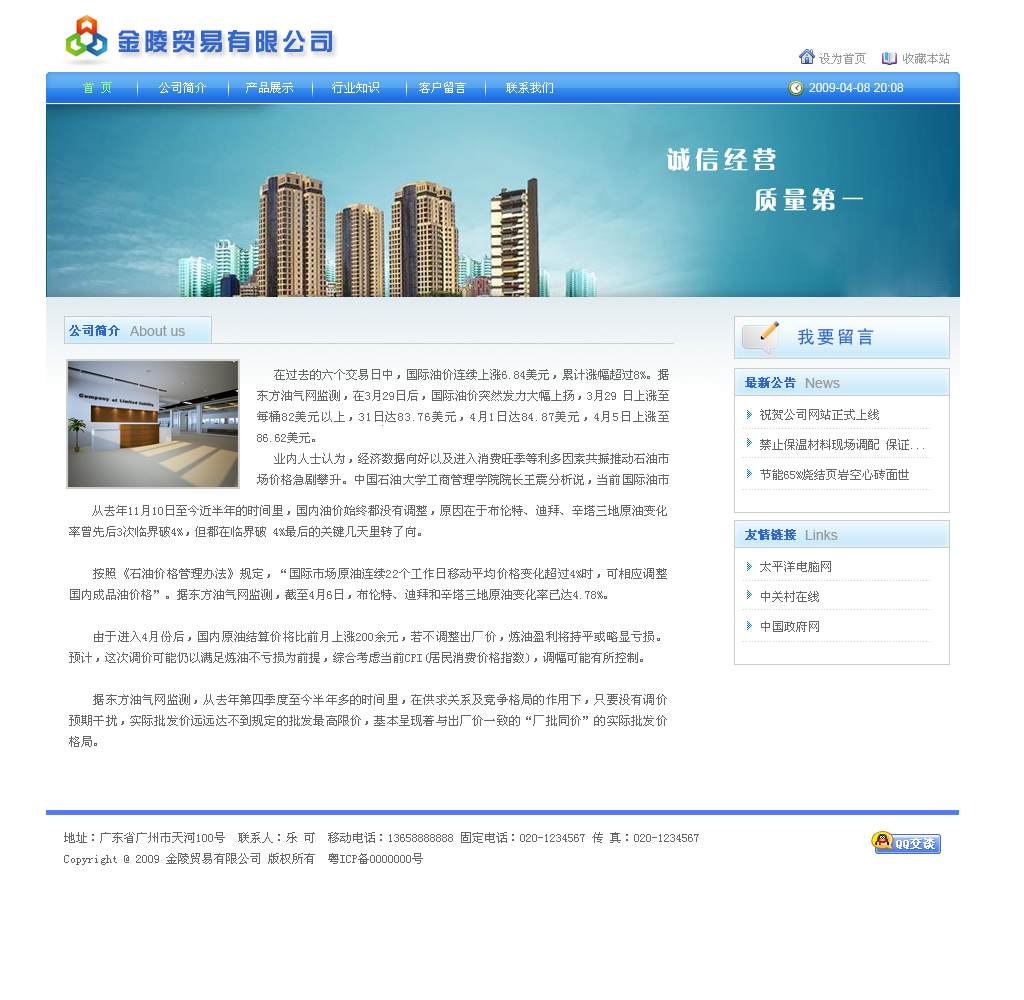
<style>
.page{position:relative;width:1024px;height:1000px;background:#ffffff}
.page>*{position:absolute;margin:0}
.t1{font:24px "HYk1gj";letter-spacing:0.15em;color:#3366cc}
.t2{font:12px "SimSun";color:#999999}
.t3{font:12px "SimSun";color:#99ff66}
.t4{font:12px "SimSun";color:#ffffff}
.t5{font:12px "ArialMT";color:#ffffff}
.t6{font:24px "FZCQJW--GB1-0";letter-spacing:0.2em;color:#fefefe}
.t7{font:12px "SimSun";color:#3366cc;font-weight:bold}
.t8{font:14px "ArialMT";color:#999999}
.t9{font:18px "SimHei";letter-spacing:0.1em;color:#3366cc}
.t10{font:12px "SimSun";color:#666666}
.t11{font:12px "SimSun";color:#666666;text-transform:uppercase}
</style>
<div class="page">
<p class="t1" style="left:118px;top:30px;width:214px;height:23px">金陵贸易有限公司</p>
<p class="t2" style="left:819px;top:53px;width:47px;height:11px">设为首页</p>
<p class="t2" style="left:903px;top:53px;width:47px;height:11px">收藏本站</p>
<p class="t3" style="left:83px;top:82px;width:29px;height:11px">首 页</p>
<p class="t4" style="left:159px;top:82px;width:47px;height:11px">公司简介</p>
<p class="t4" style="left:246px;top:82px;width:47px;height:11px">产品展示</p>
<p class="t4" style="left:332px;top:82px;width:47px;height:11px">行业知识</p>
<p class="t4" style="left:419px;top:82px;width:47px;height:11px">客户留言</p>
<p class="t4" style="left:506px;top:82px;width:47px;height:11px">联系我们</p>
<p class="t5" style="left:809px;top:83px;width:95px;height:9px">2009-04-08 20:08</p>
<p class="t6" style="left:666px;top:148px;width:110px;height:23px">诚信经营</p>
<p class="t6" style="left:754px;top:188px;width:109px;height:23px">质量第一</p>
<p class="t7" style="left:69px;top:325px;width:51px;height:11px">公司简介</p>
<p class="t8" style="left:130px;top:325px;width:55px;height:11px">About us</p>
<p class="t9" style="left:798px;top:328px;width:76px;height:17px">我要留言</p>
<p class="t10" style="left:257px;top:369px;width:412px;height:116px;text-align:justify">在过去的六个交易日中，国际油价连续上涨6.84美元，累计涨幅超过8%。据东方油气网监测，在3月29日后，国际油价突然发力大幅上扬，3月29 日上涨至每桶82美元以上，31日达83.76美元，4月1日达84.87美元，4月5日上涨至86.62美元。<br>   业内人士认为，经济数据向好以及进入消费旺季等利多因素共振推动石油市场价格急剧攀升。中国石油大学工商管理学院院长王震分析说，当前国际油市总体反映投<br><br><br>资者对经济复苏和能源需求前景乐观预期，使得供需基本面有一定的支撑；另一方面金融市场的流动性比较充裕，交易资金有保障，这些因素推动了油价上涨。当然，尽管目前国际油价连续攀升，但总体上看波动并不很大，还是在预计的油价中长期波动的范围内。</p>
<p class="t7" style="left:745px;top:377px;width:51px;height:11px">最新公告</p>
<p class="t8" style="left:805px;top:378px;width:35px;height:10px">News</p>
<p class="t11" style="left:760px;top:409px;width:119px;height:11px">祝贺公司网站正式上线</p>
<p class="t11" style="left:760px;top:439px;width:164px;height:11px">禁止保温材料现场调配 保证...</p>
<p class="t11" style="left:760px;top:469px;width:149px;height:11px">节能65%烧结页岩空心砖面世</p>
<p class="t10" style="left:69px;top:505px;width:598px;height:242px;text-align:justify">从去年11月10日至今近半年的时间里，国内油价始终都没有调整，原因在于布伦特、迪拜、辛塔三地原油变化率曾先后3次临界破4%，但都在临界破 4%最后的关键几天里转了向。<br><br>　　按照《石油价格管理办法》规定，“国际市场原油连续22个工作日移动平均价格变化超过4%时，可相应调整国内成品油价格”。据东方油气网监测，截至4月6日，布伦特、迪拜和辛塔三地原油变化率已达4.78%。<br><br>　　由于进入4月份后，国内原油结算价将比前月上涨200余元，若不调整出厂价，炼油盈利将持平或略显亏损。预计，这次调价可能仍以满足炼油不亏损为前提，综合考虑当前CPI(居民消费价格指数)，调幅可能有所控制。<br><br>　　据东方油气网监测，从去年第四季度至今半年多的时间里，在供求关系及竞争格局的作用下，只要没有调价预期干扰，实际批发价远远达不到规定的批发最高限价，基本呈现着与出厂价一致的“厂批同价”的实际批发价格局。</p>
<p class="t7" style="left:745px;top:529px;width:51px;height:11px">友情链接</p>
<p class="t8" style="left:805px;top:530px;width:33px;height:10px">Links</p>
<p class="t11" style="left:760px;top:561px;width:71px;height:11px">太平洋电脑网</p>
<p class="t11" style="left:761px;top:591px;width:58px;height:11px">中关村在线</p>
<p class="t11" style="left:761px;top:621px;width:58px;height:11px">中国政府网</p>
<p class="t10" style="left:64px;top:832px;width:635px;height:33px">地址：广东省广州市天河100号  联系人：乐 可  移动电话：13658888888 固定电话：020-1234567 传 真：020-1234567<br>Copyright @ 2009 金陵贸易有限公司 版权所有  粤ICP备0000000号</p>
</div>
